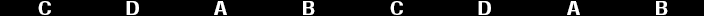
<style>
.page{position:relative;width:704px;height:16px;background:#000000}
.page>*{position:absolute;margin:0}
.t1{font:17px "FolkPro-Heavy";color:#ffffff}
</style>
<div class="page">
<p class="t1" style="left:38px;top:1px;width:13px;height:14px">C</p>
<p class="t1" style="left:126px;top:1px;width:13px;height:14px">D</p>
<p class="t1" style="left:214px;top:1px;width:13px;height:14px">A</p>
<p class="t1" style="left:303px;top:1px;width:12px;height:14px">B</p>
<p class="t1" style="left:390px;top:1px;width:13px;height:14px">C</p>
<p class="t1" style="left:478px;top:1px;width:13px;height:14px">D</p>
<p class="t1" style="left:567px;top:1px;width:13px;height:14px">A</p>
<p class="t1" style="left:656px;top:1px;width:12px;height:14px">B</p>
</div>
